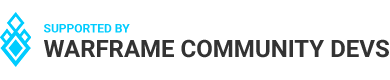
<style>
.page{position:relative;width:390px;height:80px;background:#ffffff}
.page>*{position:absolute;margin:0}
.t1{font:12px "Roboto-Bold";color:#00ccff}
.t2{font:24px "Roboto-Bold";color:#333333}
</style>
<div class="page">
<p class="t1" style="left:44px;top:24px;width:86px;height:9px">SUPPORTED BY</p>
<p class="t2" style="left:44px;top:39px;width:345px;height:19px">WARFRAME COMMUNITY DEVS</p>
</div>
